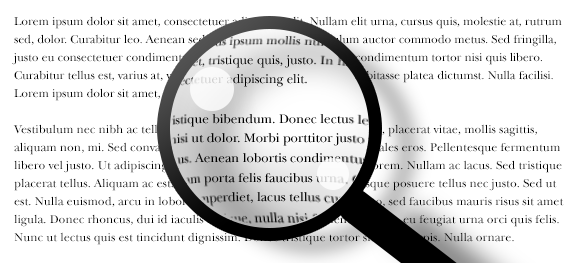
<style>
.page{position:relative;width:579px;height:263px;background:#ffffff}
.page>*{position:absolute;margin:0}
.t1{font:12px/18px "NewBaskerville-Roman";color:#000000}
</style>
<div class="page">
<p class="t1" style="left:12px;top:16px;width:552px;height:229px">Lorem ipsum dolor sit amet, consectetuer adipiscing elit. Nullam elit urna, cursus quis, molestie at, rutrum sed, dolor. Curabitur leo. Aenean sed risus. Sed ac eros. Vestibulum auctor commodo metus. Sed fringilla, justo eu consectetuer condimentum, lacus ipsum mollis nunc, sed condimentum tortor nisi quis libero. Curabitur tellus est, varius at, varius et, tristique quis, justo. In hac habitasse platea dictumst. Nulla facilisi. Lorem ipsum dolor sit amet, consectetuer adipiscing elit. <br><br>Vestibulum nec nibh ac tellus tristique bibendum. Donec lectus lectus, placerat vitae, mollis sagittis, aliquam non, mi. Sed convallis nisi ut dolor. Morbi porttitor justo sodales eros. Pellentesque fermentum libero vel justo. Ut adipiscing lacus. Aenean lobortis condimentum lorem. Nullam ac lacus. Sed tristique placerat tellus. Aliquam ac est. Etiam porta felis faucibus urna. Quisque posuere tellus nec justo. Sed ut est. Nulla euismod, arcu in lobortis imperdiet, lacus tellus cursus justo, sed faucibus mauris risus sit amet ligula. Donec rhoncus, dui id iaculis tristique, nulla nisi fermentum justo, eu feugiat urna orci quis felis. Nunc ut lectus quis est tincidunt dignissim. Donec tristique tortor sit amet turpis. Nulla ornare.</p>
</div>
